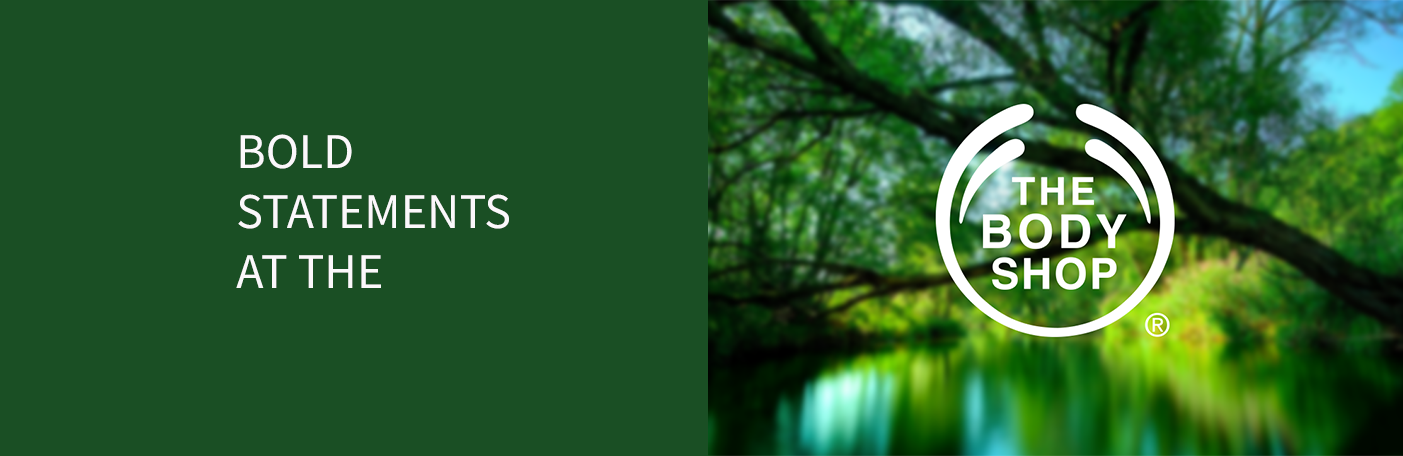
<style>
.page{position:relative;width:1403px;height:456px;background:#1a4f24}
.page>*{position:absolute;margin:0}
.t1{font:50px "SourceSansRoman-Regular";color:#fbf8fb}
</style>
<div class="page">
<p class="t1" style="left:236px;top:134px;width:273px;height:154px">BOLD<br>STATEMENTS<br>AT THE</p>
</div>
